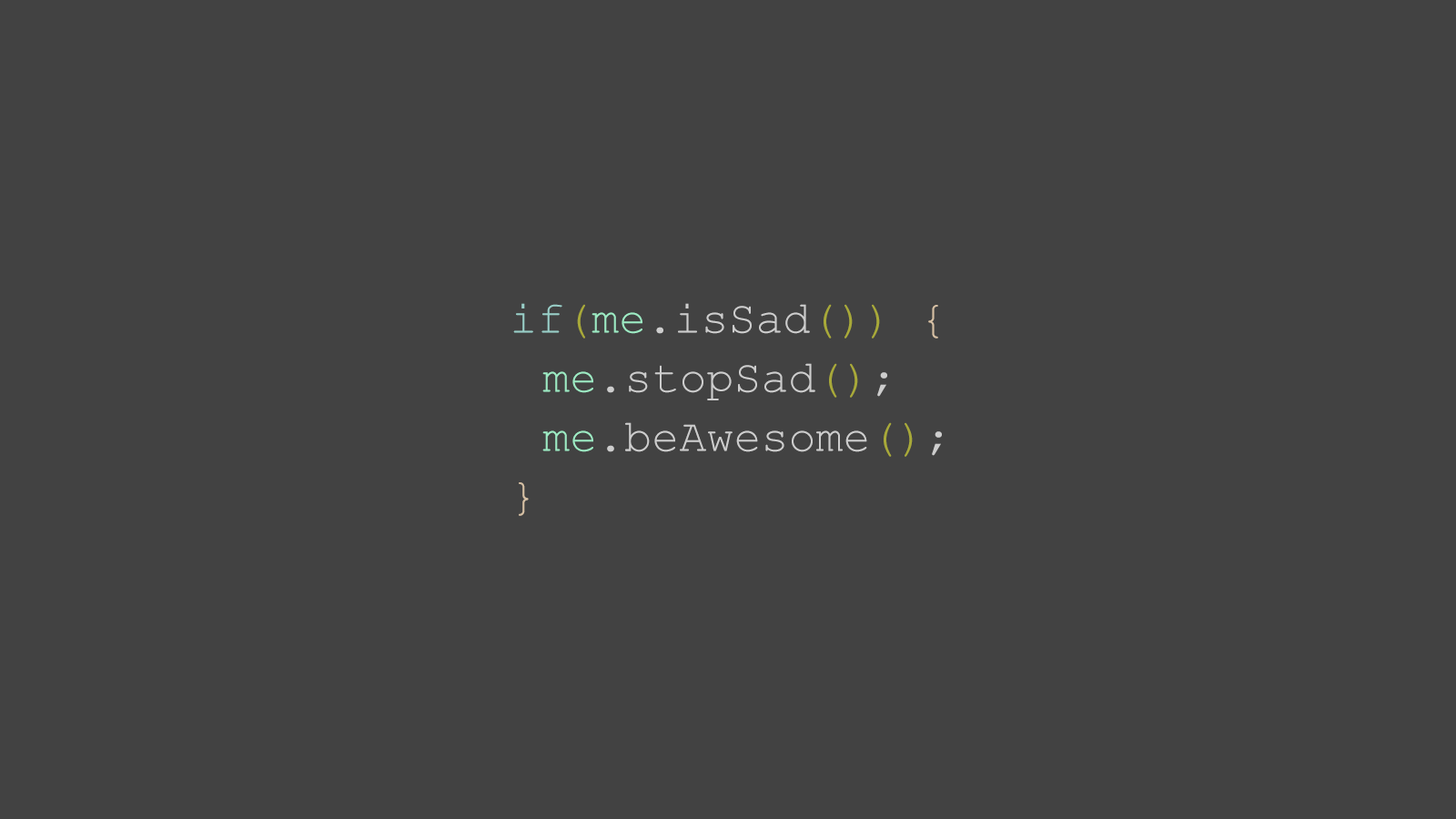
<style>
.page{position:relative;width:1456px;height:819px;background:#424242}
.page>*{position:absolute;margin:0}
.t1{font:45.5px/59.1px "CourierNewPSMT";color:#cdcdcd}
.t2{font:45.5px/59.1px "CourierNewPSMT";color:#99cec7}
.t3{font:45.5px/59.1px "CourierNewPSMT";color:#a8a939}
.t4{font:45.5px/59.1px "CourierNewPSMT";color:#9deac3}
.t5{font:45.5px/59.1px "CourierNewPSMT";color:#d6c0a4}
</style>
<div class="page">
<p class="t1" style="left:513px;top:303px;width:429px;height:213px"><span class="t2">if</span><span class="t3">(</span><span class="t4">me</span>.isSad<span class="t3">()) </span><span class="t5">{<br> </span><span class="t4">me</span>.stopSad<span class="t3">()</span>;<br> <span class="t4">me</span>.beAwesome<span class="t3">()</span>;<br><span class="t5">}</span></p>
</div>
